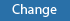
<style>
.page{position:relative;width:70px;height:21px;background:#2970a8}
.page>*{position:absolute;margin:0}
.t1{font:13.9px "MyriadPro-Regular";color:#ffffff}
</style>
<div class="page">
<p class="t1" style="left:12px;top:4px;width:45px;height:13px">Change</p>
</div>
